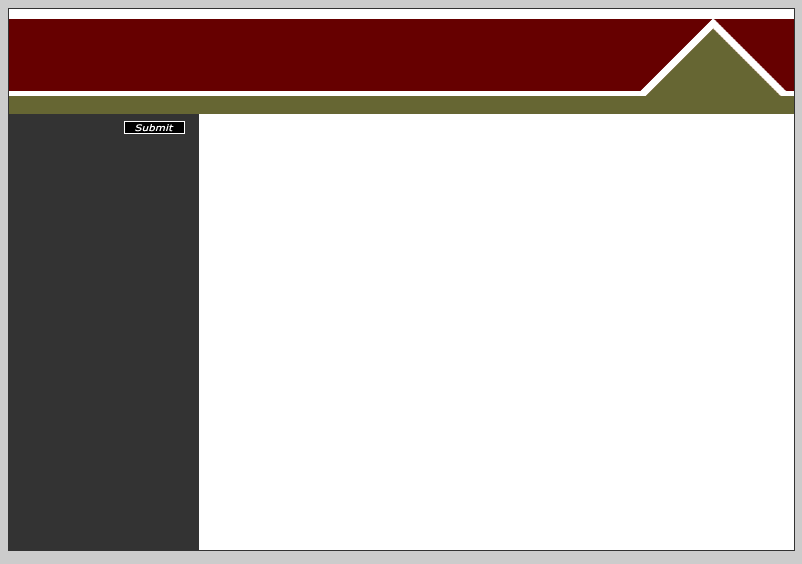
<style>
.page{position:relative;width:802px;height:564px;background:#ffffff}
.page>*{position:absolute;margin:0}
.t1{font:9px "Verdana-Italic";letter-spacing:0.018em;color:#ffffff;scale:1.15 1}
</style>
<div class="page">
<p class="t1" style="left:135px;top:124px;width:39px;height:8px">Submit</p>
</div>
